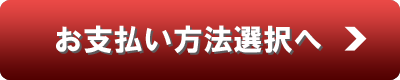
<style>
.page{position:relative;width:400px;height:80px}
.page>*{position:absolute;margin:0}
.t1{font:30px "HGSSoeiKakugothicUB";color:#ffffff}
.t2{font:30px "HGSSoeiKakugothicUB"}
</style>
<div class="page">
<p class="t1" style="left:56px;top:25px;width:266px;height:29px">お支払い方法選択へ</p>
<p class="t2" style="left:58px;top:27px;width:266px;height:29px">お支払い方法選択へ</p>
</div>
